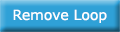
<style>
.page{position:relative;width:120px;height:32px;background:#2fa1d7}
.page>*{position:absolute;margin:0}
.t1{font:14px "Verdana";color:#ffffff}
</style>
<div class="page">
<p class="t1" style="left:13px;top:9px;width:94px;height:14px">Remove Loop</p>
</div>
